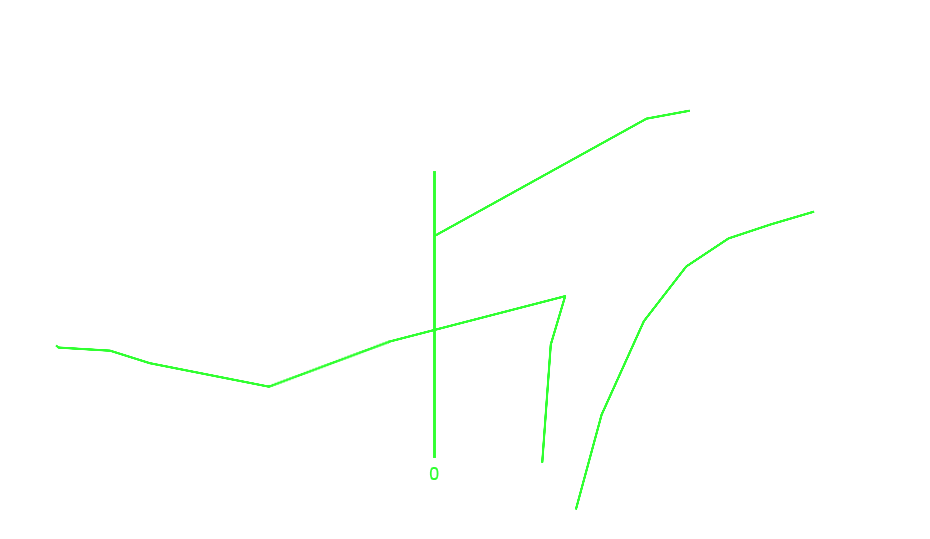
<style>
.page{position:relative;width:930px;height:539px;background:#ffffff}
.page>*{position:absolute;margin:0}
.t1{font:18px "ArialMT";letter-spacing:-0.015em;color:#30ff31}
</style>
<div class="page">
<p class="t1" style="left:429px;top:467px;width:10px;height:13px">0</p>
</div>
